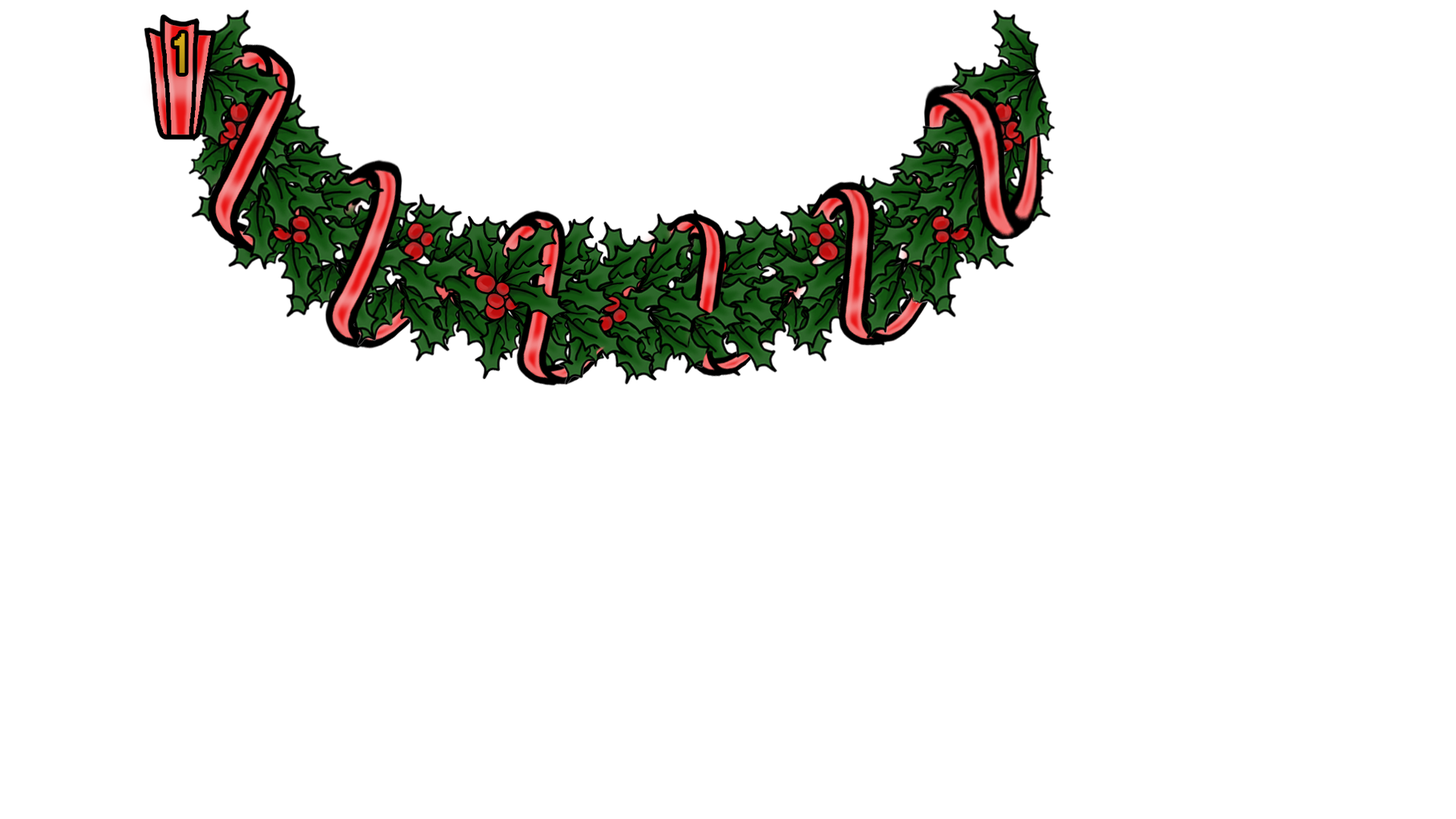
<style>
.page{position:relative;width:1456px;height:819px;background:#ffffff}
.page>*{position:absolute;margin:0}
.t1{font:54.6px "MS Sans Serif";color:#d8ae1a}
</style>
<div class="page">
<p class="t1" style="left:174px;top:33px;width:11px;height:40px">1</p>
</div>
